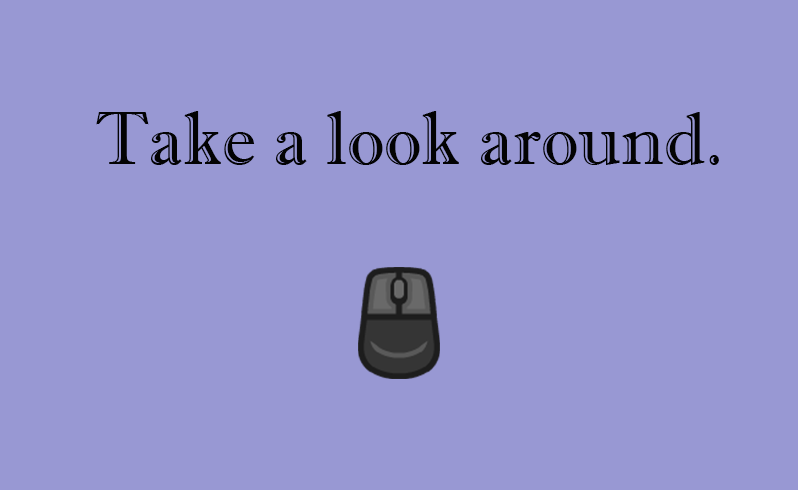
<style>
.page{position:relative;width:798px;height:490px;background:#9898d3}
.page>*{position:absolute;margin:0}
.t1{font:74.8px "ImprintMT-Shadow";color:#030303}
</style>
<div class="page">
<p class="t1" style="left:96px;top:111px;width:623px;height:54px">Take a look around.</p>
</div>
